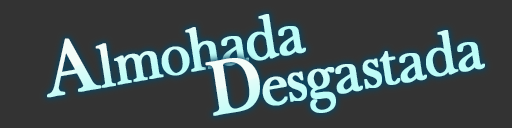
<style>
.page{position:relative;width:512px;height:128px;background:#333333}
.page>*{position:absolute;margin:0}
.t1{font:68.7px "BaskervilleLight";letter-spacing:-0.06em;color:#c4fcf8;font-weight:bold;scale:0.93 1}
.t2{font:90.1px "BaskervilleLight";letter-spacing:-0.06em;color:#c4fcf8;font-weight:bold;scale:0.93 1}
.t3{font:68.7px "BaskervilleLight";letter-spacing:-0.06em;color:#c3fcf8;font-weight:bold;scale:0.93 1}
.t4{font:90.1px "BaskervilleLight";letter-spacing:-0.06em;color:#c3fcf8;font-weight:bold;scale:0.93 1}
</style>
<div class="page">
<p class="t1" style="left:47px;top:14px;width:259px;height:84px;rotate:-10deg"><span class="t2">A</span>lmohada</p>
<p class="t3" style="left:205px;top:30px;width:280px;height:86px;rotate:-10deg"><span class="t4">D</span>esgastada</p>
</div>
